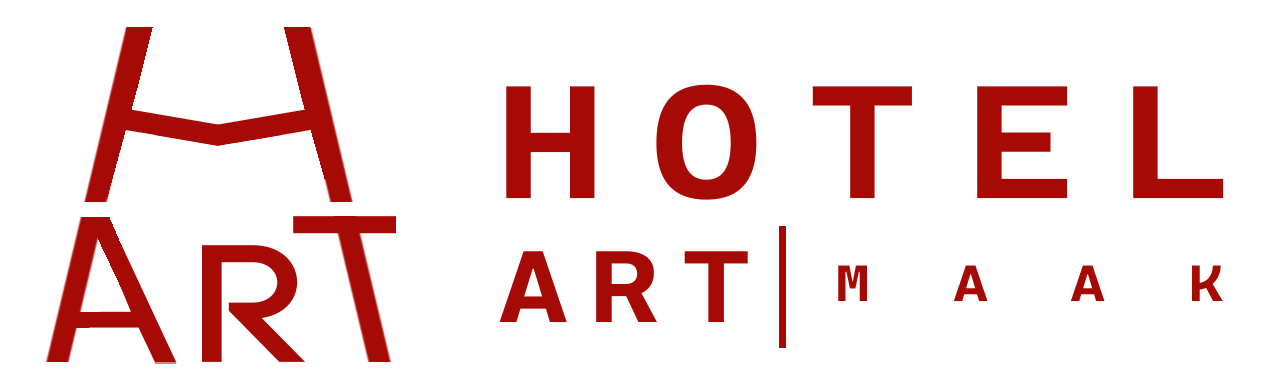
<style>
.page{position:relative;width:1267px;height:390px;background:#ffffff}
.page>*{position:absolute;margin:0}
.t1{font:160.8px "CascadiaCodeRoman-Bold";letter-spacing:0.24em;color:#a60a05;scale:1.18 1}
.t2{font:101.7px "CascadiaCodeRoman-Bold";letter-spacing:0.18em;color:#a60a05;scale:1.18 1}
.t3{font:51.3px "CascadiaCodeRoman-Bold";letter-spacing:1.36em;color:#a60a05;scale:1.18 1}
</style>
<div class="page">
<p class="t1" style="left:506px;top:84px;width:718px;height:116px">HOTEL</p>
<p class="t2" style="left:499px;top:251px;width:249px;height:71px">ART</p>
<p class="t3" style="left:838px;top:265px;width:385px;height:36px">MAAK</p>
</div>
